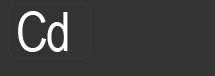
<style>
.page{position:relative;width:215px;height:76px;background:#333333}
.page>*{position:absolute;margin:0}
.t1{font:54.2px "ArialNarrow";letter-spacing:-0.045em;color:#fffefa}
</style>
<div class="page">
<p class="t1" style="left:18px;top:11px;width:50px;height:41px">Cd</p>
</div>
